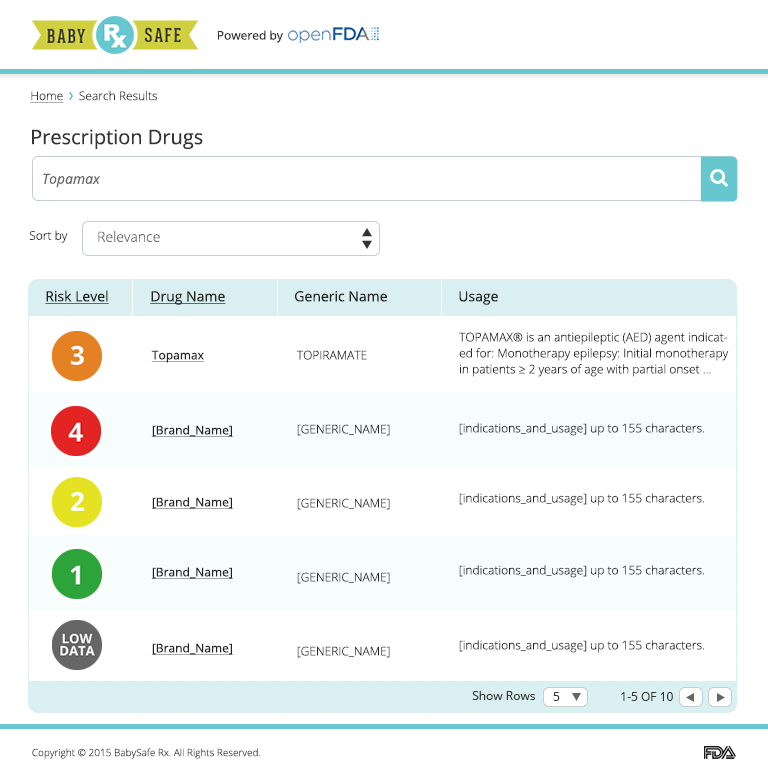
<style>
.page{position:relative;width:768px;height:775px;background:#ffffff}
.page>*{position:absolute;margin:0}
.t1{font:12px "OpenSans";color:#333333}
.t2{font:12px "OpenSans-Light";color:#333333}
.t3{font:12px "OpenSans-Light";color:#333333;text-decoration:underline}
.t4{font:20px "OpenSans";color:#333333}
.t5{font:14px "OpenSans-Italic";color:#666666}
.t6{font:12px "OpenSans-Light";color:#222222}
.t7{font:14px "OpenSans-Light";color:#666666}
.t8{font:14px "OpenSans";color:#222222;text-decoration:underline}
.t9{font:14px "OpenSans";color:#222222}
.t10{font:12px/16px "OpenSans-Light";color:#222222}
.t11{font:12px "OpenSans";color:#222222;text-decoration:underline}
.t12{font:12px/74px "OpenSans-Light";color:#222222;text-transform:uppercase}
.t13{font:12px/74px "OpenSans-Light";color:#222222}
.t14{font:12px "OpenSans";color:#333333;text-transform:uppercase}
.t15{font:10px "OpenSans-Light";color:#333333}
</style>
<div class="page">
<p class="t1" style="left:218px;top:30px;width:65px;height:13px">Powered by</p>
<p class="t2" style="left:30px;top:90px;width:128px;height:13px"><span class="t3">Home</span>     Search Results</p>
<p class="t4" style="left:32px;top:129px;width:171px;height:20px">Prescription Drugs</p>
<p class="t5" style="left:43px;top:173px;width:58px;height:15px">Topamax</p>
<p class="t6" style="left:29px;top:230px;width:39px;height:13px">Sort by</p>
<p class="t7" style="left:98px;top:231px;width:62px;height:11px">Relevance</p>
<p class="t8" style="left:45px;top:290px;width:64px;height:14px">Risk Level</p>
<p class="t8" style="left:150px;top:291px;width:76px;height:14px">Drug Name</p>
<p class="t9" style="left:295px;top:291px;width:92px;height:11px">Generic Name</p>
<p class="t9" style="left:459px;top:291px;width:39px;height:14px">Usage</p>
<p class="t10" style="left:459px;top:332px;width:270px;height:45px">TOPAMAX® is an antiepileptic (AED) agent indicated for: Monotherapy epilepsy: Initial monotherapy in patients ≥ 2 years of age with partial onset ...</p>
<p class="t11" style="left:151px;top:350px;width:53px;height:13px">Topamax</p>
<p class="t12" style="left:296px;top:350px;width:94px;height:308px">TOPIRAMATE<br><span class="t13">[</span>generic_name<span class="t13">]<br></span>[generic_name]<br>[generic_name]<br>[generic_name]</p>
<p class="t11" style="left:151px;top:425px;width:82px;height:12px">[Brand_Name]</p>
<p class="t6" style="left:459px;top:423px;width:246px;height:13px">[indications_and_usage] up to 155 characters.</p>
<p class="t11" style="left:151px;top:497px;width:82px;height:12px">[Brand_Name]</p>
<p class="t6" style="left:459px;top:493px;width:246px;height:13px">[indications_and_usage] up to 155 characters.</p>
<p class="t11" style="left:151px;top:567px;width:82px;height:12px">[Brand_Name]</p>
<p class="t6" style="left:459px;top:565px;width:246px;height:13px">[indications_and_usage] up to 155 characters.</p>
<p class="t6" style="left:459px;top:640px;width:246px;height:13px">[indications_and_usage] up to 155 characters.</p>
<p class="t11" style="left:151px;top:643px;width:82px;height:12px">[Brand_Name]</p>
<p class="t1" style="left:472px;top:691px;width:63px;height:9px">Show Rows</p>
<p class="t1" style="left:553px;top:692px;width:7px;height:9px">5</p>
<p class="t14" style="left:621px;top:692px;width:52px;height:9px">1-5 of 10</p>
<p class="t15" style="left:32px;top:748px;width:228px;height:11px">Copyright © 2015 BabySafe Rx. All Rights Reserved.</p>
</div>
